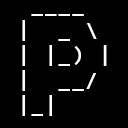
<style>
.page{position:relative;width:128px;height:128px;background:#000000}
.page>*{position:absolute;margin:0}
.t1{font:20.8px "Consolas-Bold";letter-spacing:0.1em;color:#ffffff;text-transform:uppercase}
</style>
<div class="page">
<p class="t1" style="left:22px;top:14px;width:85px;height:102px">____<br>|  _ \<br>| |_) |<br>|  __/<br>|_|</p>
</div>
